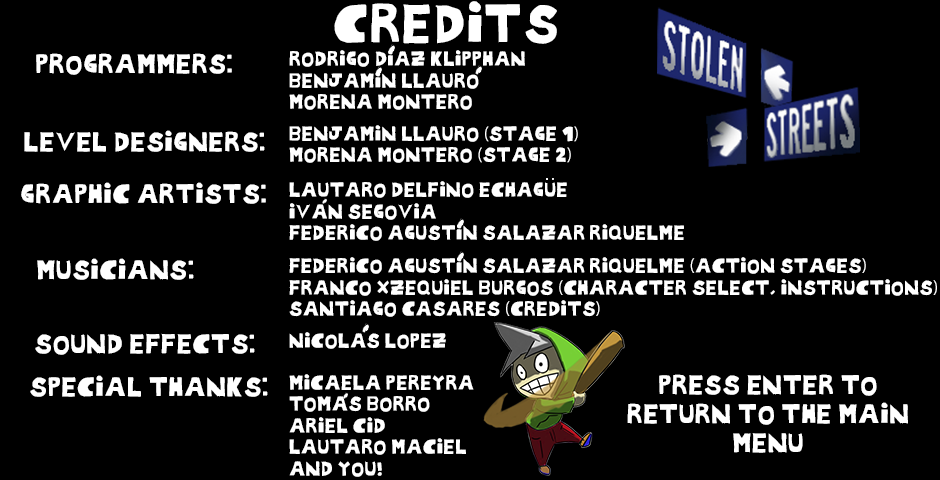
<style>
.page{position:relative;width:940px;height:480px;background:#000000}
.page>*{position:absolute;margin:0}
.t1{font:48px "StolenStreet-Regular";color:#ffffff}
.t2{font:24px "StolenStreet-Regular";color:#ffffff}
.t3{font:18px "StolenStreet-Regular";color:#ffffff}
.t4{font:18px "MyriadPro-Regular";color:#ffffff}
</style>
<div class="page">
<p class="t1" style="left:334px;top:1px;width:223px;height:43px">CREDITS</p>
<p class="t2" style="left:36px;top:53px;width:196px;height:22px">PROGRAMMERS:</p>
<p class="t3" style="left:289px;top:50px;width:236px;height:60px">RODRIGO DIAZ KLIPPHAN<br>BENJAMIN LLAURO<br>MORENA MONTERO</p>
<p class="t3" style="left:289px;top:125px;width:289px;height:38px">BENJAMIN LLAURO <span class="t4">(</span>STAGE 1<span class="t4">)<br></span>MORENA MONTERO <span class="t4">(</span>STAGE 2<span class="t4">)</span></p>
<p class="t2" style="left:24px;top:130px;width:241px;height:22px">LEVEL DESIGNERS:</p>
<p class="t2" style="left:21px;top:182px;width:245px;height:22px">GRAPHIC ARTISTS:</p>
<p class="t3" style="left:289px;top:181px;width:395px;height:60px">LAUTARO DELFINO ECHAGUE<br>IVAN SEGOVIA<br>FEDERICO AGUSTIN SALAZAR RIQUELME</p>
<p class="t3" style="left:289px;top:257px;width:648px;height:60px">FEDERICO AGUSTIN SALAZAR RIQUELME <span class="t4">(</span>ACTION STAGES<span class="t4">)<br></span>FRANCO XZEQUIEL BURGOS <span class="t4">(</span>CHARACTER SELECT, INSTRUCTIONS<span class="t4">)</span><br>SANTIAGO CASARES <span class="t4">(</span>CREDITS<span class="t4">)</span></p>
<p class="t2" style="left:37px;top:258px;width:157px;height:22px">MUSICIANS:</p>
<p class="t2" style="left:35px;top:333px;width:220px;height:22px">SOUND EFFECTS:</p>
<p class="t3" style="left:289px;top:332px;width:157px;height:17px">NICOLAS LOPEZ</p>
<p class="t2" style="left:30px;top:375px;width:238px;height:22px">SPECIAL THANKS:</p>
<p class="t3" style="left:289px;top:374px;width:185px;height:103px">MICAELA PEREYRA<br>TOMAS BORRO<br>ARIEL CID<br>LAUTARO MACIEL<br>AND YOU!</p>
<p class="t2" style="left:627px;top:374px;width:281px;height:79px;text-align:center">PRESS ENTER TO RETURN TO THE MAIN MENU</p>
</div>
